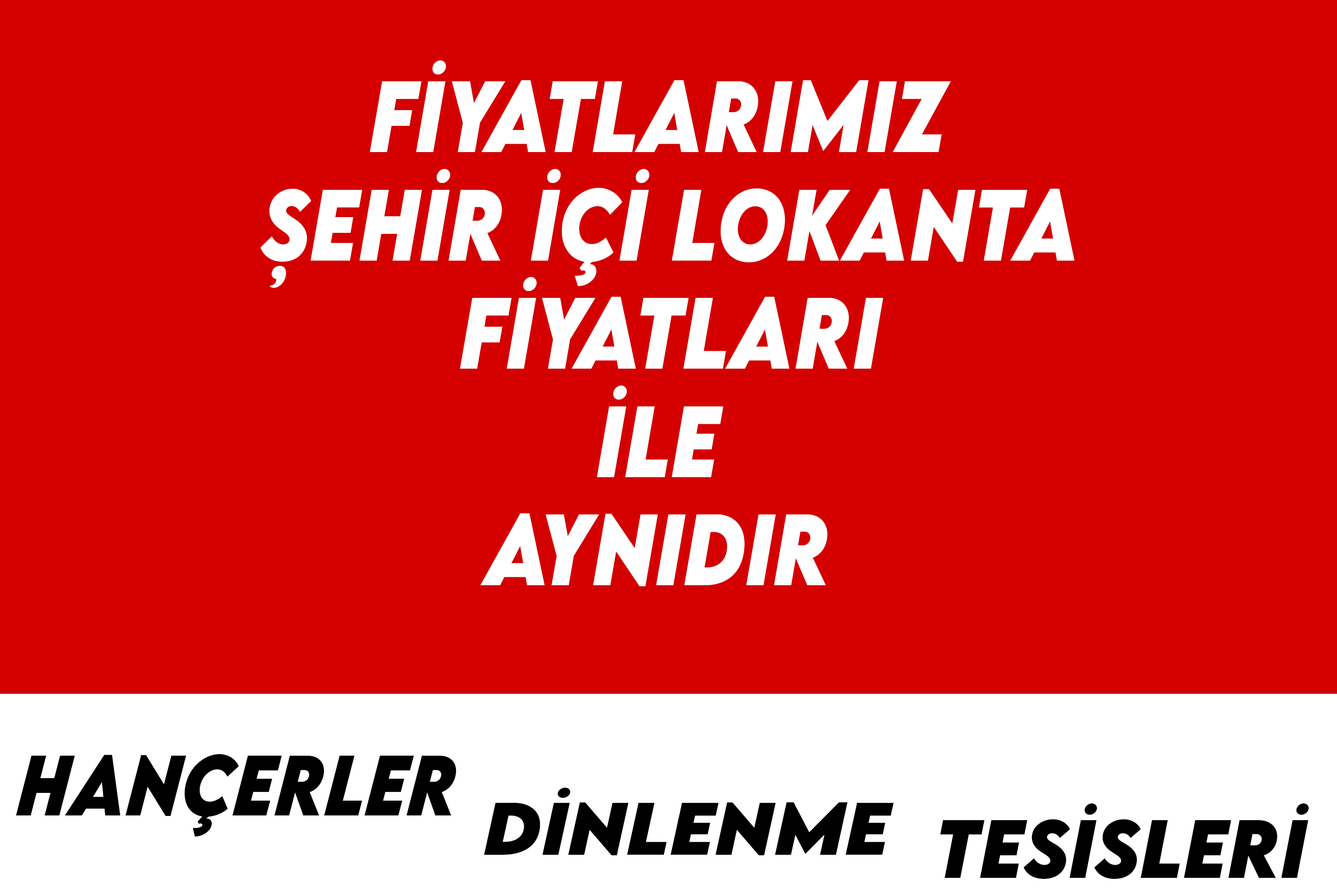
<style>
.page{position:relative;width:1337px;height:892px;background:#d40000}
.page>*{position:absolute;margin:0}
.t1{font:90.2px "LEMONMILK-BoldItalic";color:#ffffff;scale:0.89 1}
.t2{font:76.3px "LEMONMILK-BoldItalic";color:#000000;scale:0.91 1}
.t3{font:66.1px "LEMONMILK-BoldItalic";color:#000000;scale:1.13 1}
.t4{font:73.4px "LEMONMILK-BoldItalic";color:#000000}
</style>
<div class="page">
<p class="t1" style="left:261px;top:60px;width:814px;height:526px;text-align:center">FİYATLARIMIZ<br> ŞEHİR İÇİ lokanta<br> FİYATLARI<br> İLE <br>Aynıdır</p>
<p class="t2" style="left:16px;top:754px;width:441px;height:83px">hançerler</p>
<p class="t3" style="left:484px;top:787px;width:410px;height:68px">dinlenme</p>
<p class="t4" style="left:940px;top:803px;width:369px;height:76px">tesisleri</p>
</div>
